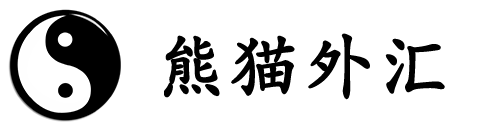
<style>
.page{position:relative;width:484px;height:127px;background:#ffffff}
.page>*{position:absolute;margin:0}
.t1{font:72px "AdobeKaitiStd-Regular";color:#000000;font-weight:bold}
</style>
<div class="page">
<p class="t1" style="left:164px;top:33px;width:281px;height:67px">熊猫外汇</p>
</div>
